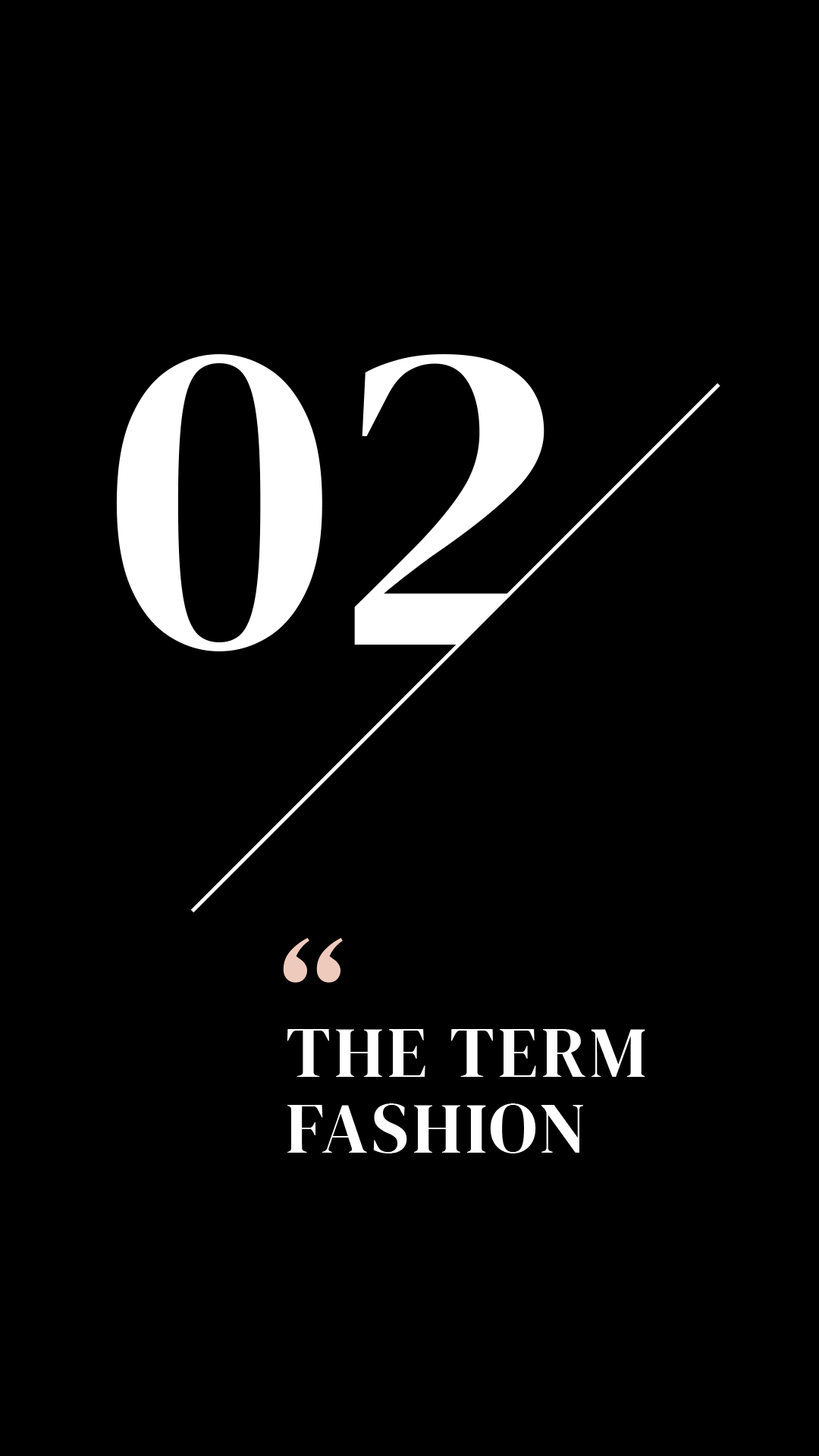
<style>
.page{position:relative;width:819px;height:1456px;background:#000000}
.page>*{position:absolute;margin:0}
.t1{font:447.4px "DMSerifDisplay-Regular";color:#ffffff;text-transform:uppercase}
.t2{font:163px "DMSerifDisplay-Italic";color:#eecabd}
.t3{font:71.3px/75.8px "DMSerifDisplay-Regular";letter-spacing:0.053em;color:#ffffff;text-transform:uppercase}
</style>
<div class="page">
<p class="t1" style="left:116px;top:354px;width:436px;height:297px">02</p>
<p class="t2" style="left:283px;top:937px;width:60px;height:46px">“</p>
<p class="t3" style="left:287px;top:1029px;width:358px;height:124px">the term<br>fashion</p>
</div>
